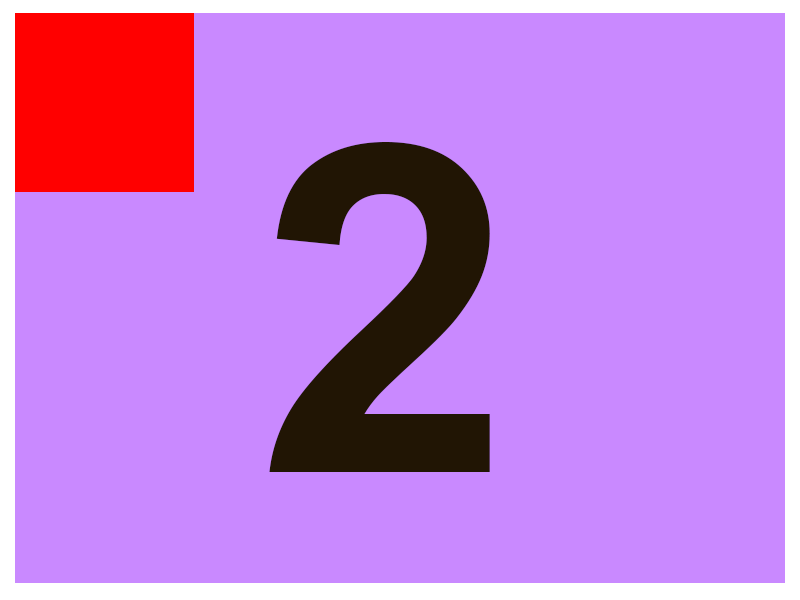
<style>
.page{position:relative;width:800px;height:600px;background:#c989ff}
.page>*{position:absolute;margin:0}
.t1{font:457.5px "Arial-BoldMT";color:#211504}
</style>
<div class="page">
<p class="t1" style="left:269px;top:142px;width:221px;height:330px">2</p>
</div>
